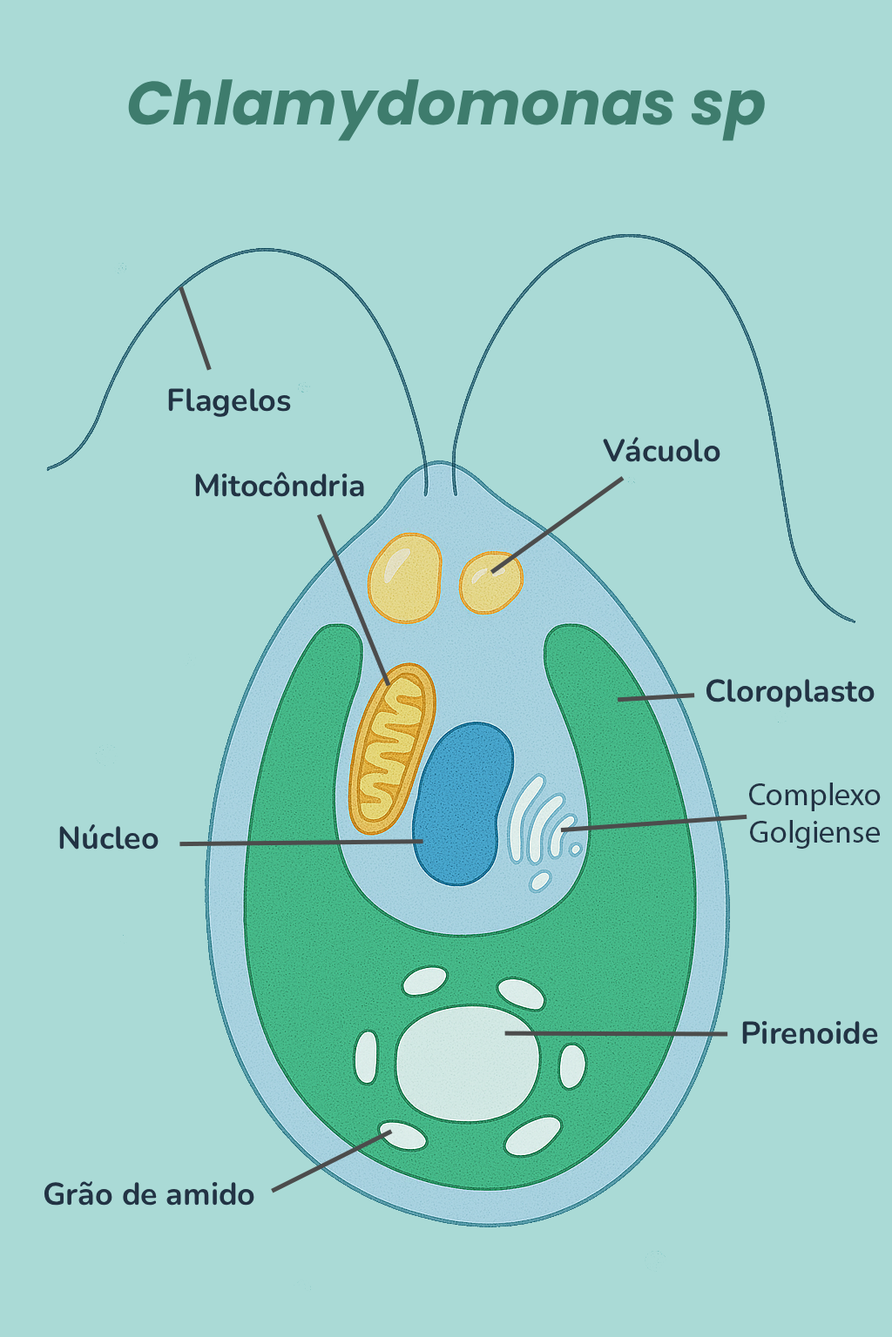
<style>
.page{position:relative;width:892px;height:1337px;background:#aadad6}
.page>*{position:absolute;margin:0}
.t1{font:60.9px "Poppins-BoldItalic";color:#3e7c6d}
.t2{font:31.3px "Nunito-Bold";color:#223344}
.t3{font:31.3px "MyriadPro-Regular";color:#223344}
</style>
<div class="page">
<p class="t1" style="left:126px;top:79px;width:640px;height:62px">Chlamydomonas sp</p>
<p class="t2" style="left:168px;top:388px;width:123px;height:29px">Flagelos</p>
<p class="t2" style="left:603px;top:437px;width:117px;height:25px">Vácuolo</p>
<p class="t2" style="left:195px;top:472px;width:169px;height:25px">Mitocôndria</p>
<p class="t2" style="left:705px;top:679px;width:169px;height:29px">Cloroplasto</p>
<p class="t3" style="left:749px;top:783px;width:131px;height:66px;text-align:center">Complexo Golgiense</p>
<p class="t2" style="left:742px;top:1021px;width:136px;height:24px">Pirenoide</p>
<p class="t2" style="left:44px;top:1182px;width:210px;height:24px">Grão de amido</p>
</div>
